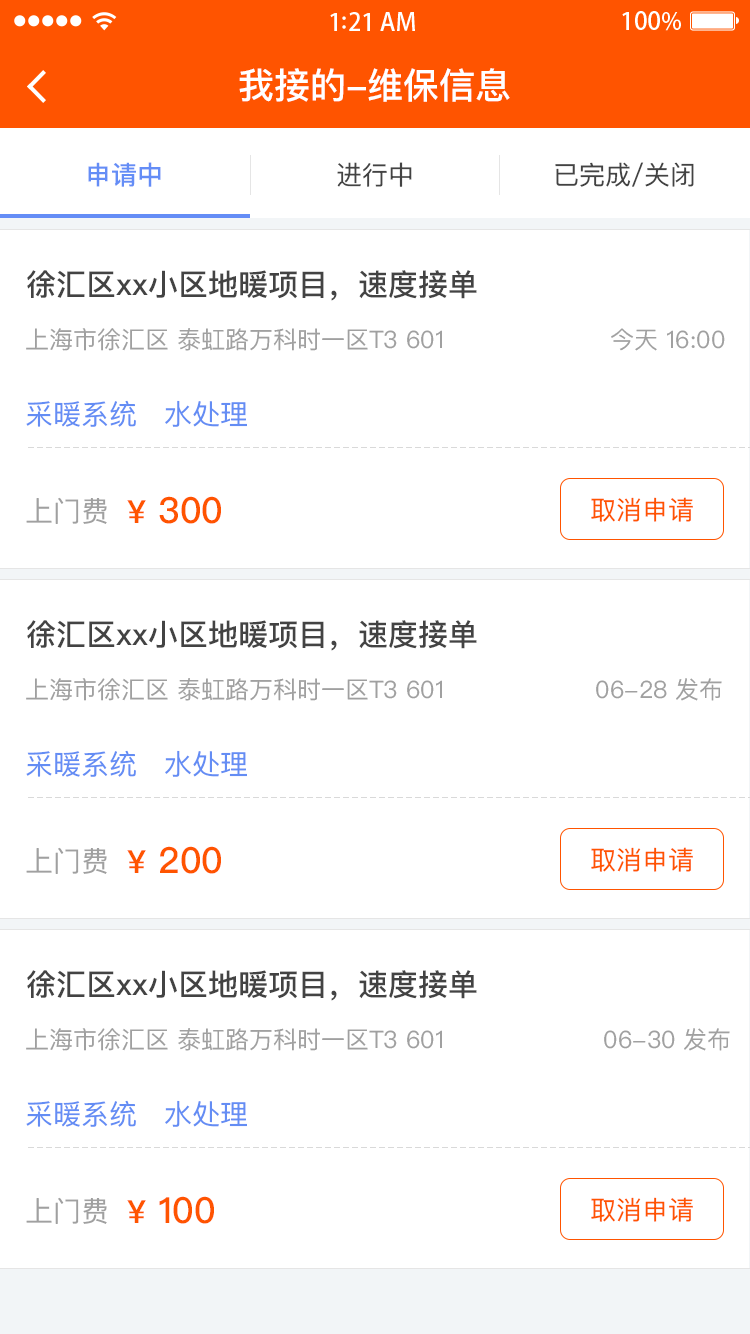
<style>
.page{position:relative;width:750px;height:1334px;background:#ffffff}
.page>*{position:absolute;margin:0}
.t1{font:36px "PingFangSC-Medium";color:#ffffff}
.t2{font:26px "PingFangSC-Medium";color:#648df6}
.t3{font:26px "PingFangSC-Regular";color:#434343}
.t4{font:30px "PingFangSC-Medium";color:#434343}
.t5{font:24px "PingFangSC-Regular";color:#a0a0a0}
.t6{font:28px "PingFangSC-Regular";color:#648df4}
.t7{font:28px "PingFangSC-Regular";color:#a0a0a0}
.t8{font:36px "PingFangSC-Medium";color:#ff5400}
.t9{font:32px "PingFangSC-Medium";color:#ff5400}
.t10{font:26px "PingFangSC-Regular";color:#ff5400}
</style>
<div class="page">
<p class="t1" style="left:239px;top:68px;width:271px;height:34px">我接的-维保信息</p>
<p class="t2" style="left:88px;top:162px;width:73px;height:25px">申请中</p>
<p class="t3" style="left:337px;top:162px;width:75px;height:25px">进行中</p>
<p class="t3" style="left:555px;top:162px;width:139px;height:25px">已完成/关闭</p>
<p class="t4" style="left:27px;top:270px;width:450px;height:31px">徐汇区xx小区地暖项目，速度接单</p>
<p class="t5" style="left:26px;top:328px;width:416px;height:23px">上海市徐汇区 泰虹路万科时一区T3 601</p>
<p class="t5" style="left:611px;top:328px;width:114px;height:23px">今天 16:00</p>
<p class="t6" style="left:26px;top:400px;width:110px;height:27px">采暖系统</p>
<p class="t6" style="left:165px;top:400px;width:82px;height:27px">水处理</p>
<p class="t7" style="left:26px;top:497px;width:81px;height:27px">上门费</p>
<p class="t8" style="left:127px;top:496px;width:94px;height:28px"><span class="t9">¥</span> 300</p>
<p class="t10" style="left:591px;top:497px;width:102px;height:25px">取消申请</p>
<p class="t4" style="left:27px;top:620px;width:450px;height:31px">徐汇区xx小区地暖项目，速度接单</p>
<p class="t5" style="left:26px;top:678px;width:416px;height:23px">上海市徐汇区 泰虹路万科时一区T3 601</p>
<p class="t5" style="left:596px;top:678px;width:126px;height:23px">06-28 发布</p>
<p class="t6" style="left:26px;top:750px;width:110px;height:27px">采暖系统</p>
<p class="t6" style="left:165px;top:750px;width:82px;height:27px">水处理</p>
<p class="t8" style="left:127px;top:846px;width:94px;height:28px"><span class="t9">¥</span> 200</p>
<p class="t7" style="left:26px;top:847px;width:81px;height:27px">上门费</p>
<p class="t10" style="left:591px;top:847px;width:102px;height:25px">取消申请</p>
<p class="t4" style="left:27px;top:970px;width:450px;height:31px">徐汇区xx小区地暖项目，速度接单</p>
<p class="t5" style="left:26px;top:1028px;width:416px;height:23px">上海市徐汇区 泰虹路万科时一区T3 601</p>
<p class="t5" style="left:604px;top:1028px;width:126px;height:23px">06-30 发布</p>
<p class="t6" style="left:26px;top:1100px;width:110px;height:27px">采暖系统</p>
<p class="t6" style="left:165px;top:1100px;width:82px;height:27px">水处理</p>
<p class="t7" style="left:26px;top:1197px;width:81px;height:27px">上门费</p>
<p class="t8" style="left:127px;top:1196px;width:87px;height:28px"><span class="t9">¥</span> 100</p>
<p class="t10" style="left:591px;top:1197px;width:102px;height:25px">取消申请</p>
</div>
